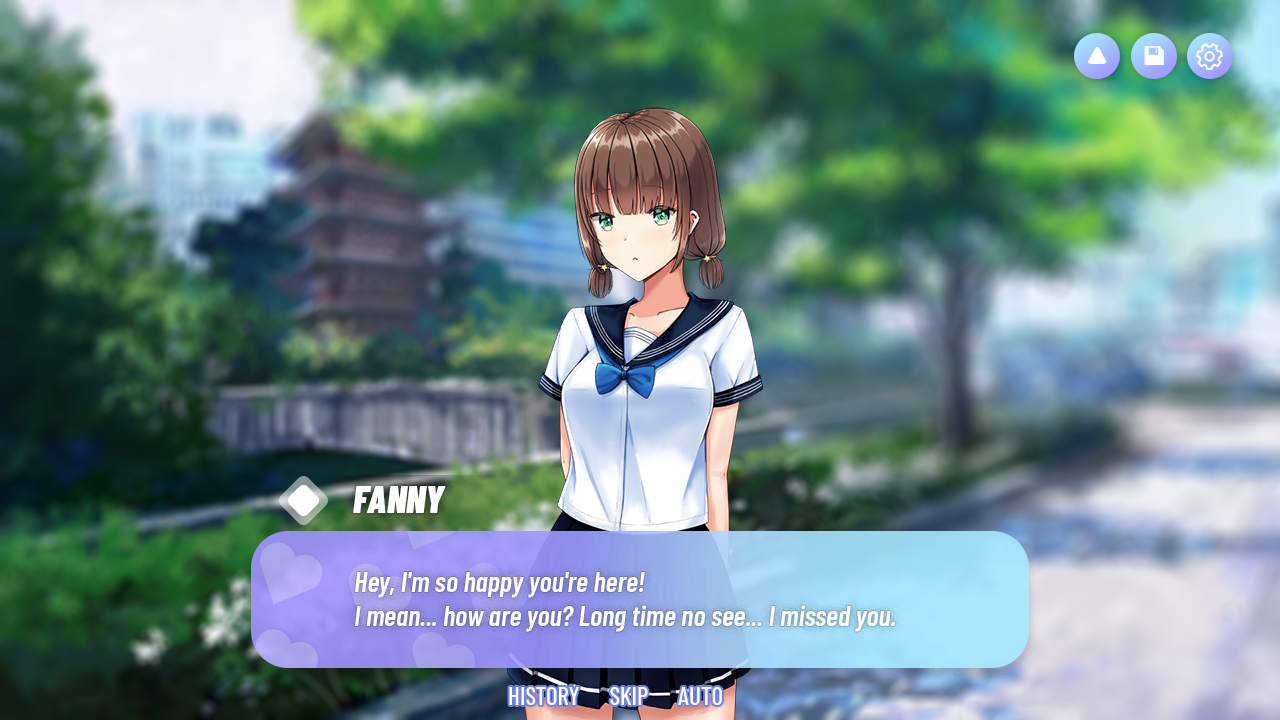
<style>
.page{position:relative;width:1280px;height:720px}
.page>*{position:absolute;margin:0}
.t1{font:37.8px "BarlowCondensed-BlackItalic";color:#ffffff}
.t2{font:28.6px "BarlowCondensed-SemiBoldItalic";color:#ffffff}
.t3{font:24.9px "BarlowCondensed-Medium";color:#ffffff;text-transform:uppercase}
</style>
<div class="page">
<p class="t1" style="left:353px;top:486px;width:93px;height:27px">FANNY</p>
<p class="t2" style="left:355px;top:572px;width:540px;height:60px">Hey, I'm so happy you're here!<br>I mean... how are you? Long time no see... I missed you.</p>
<p class="t3" style="left:509px;top:687px;width:213px;height:18px">History      Skip      Auto</p>
</div>
